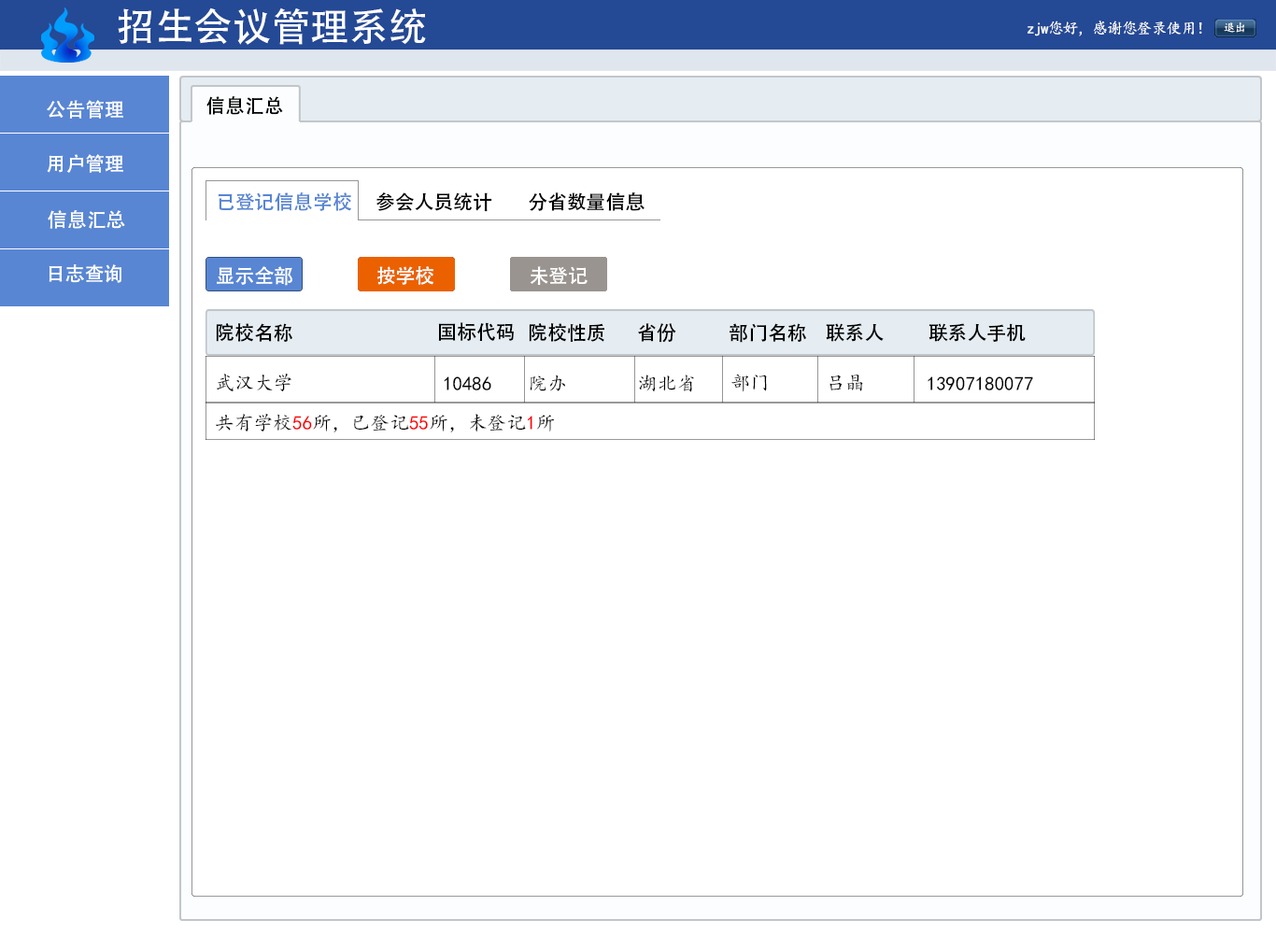
<style>
.page{position:relative;width:1276px;height:934px;background:#ffffff}
.page>*{position:absolute;margin:0}
.t1{font:38.9px "AdobeHeitiStd-Regular";color:#ffffff}
.t2{font:15.6px "KaiTi";letter-spacing:-0.05em;color:#ffffff}
.t3{font:11.7px "KaiTi";letter-spacing:-0.05em;color:#ffffff}
.t4{font:19.5px "AdobeHeitiStd-Regular";color:#fefefe}
.t5{font:19.5px "AdobeHeitiStd-Regular";color:#000000}
.t6{font:19.5px "AdobeHeitiStd-Regular";color:#5886d3}
.t7{font:19.5px "AdobeHeitiStd-Regular";color:#010101}
.t8{font:19.5px "AdobeHeitiStd-Regular";color:#ffffff}
.t9{font:19.5px "KaiTi";color:#000000}
.t10{font:19.5px "KaiTi";color:#fe0000}
.t11{font:19.5px "KaiTi";color:#ff0101}
</style>
<div class="page">
<p class="t1" style="left:118px;top:7px;width:308px;height:38px">招生会议管理系统</p>
<p class="t2" style="left:1028px;top:21px;width:174px;height:15px">zjw您好，感谢您登录使用！</p>
<p class="t3" style="left:1224px;top:22px;width:21px;height:11px">退出</p>
<p class="t4" style="left:47px;top:100px;width:76px;height:19px">公告管理</p>
<p class="t5" style="left:206px;top:96px;width:77px;height:19px">信息汇总</p>
<p class="t4" style="left:47px;top:154px;width:76px;height:19px">用户管理</p>
<p class="t6" style="left:218px;top:192px;width:133px;height:19px">已登记信息学校</p>
<p class="t7" style="left:377px;top:192px;width:115px;height:20px">参会人员统计</p>
<p class="t5" style="left:529px;top:192px;width:116px;height:19px">分省数量信息</p>
<p class="t4" style="left:48px;top:210px;width:77px;height:19px">信息汇总</p>
<p class="t4" style="left:49px;top:264px;width:72px;height:19px">日志查询</p>
<p class="t8" style="left:217px;top:266px;width:75px;height:20px">显示全部</p>
<p class="t8" style="left:377px;top:266px;width:57px;height:19px">按学校</p>
<p class="t4" style="left:530px;top:266px;width:58px;height:19px">未登记</p>
<p class="t7" style="left:216px;top:323px;width:76px;height:19px">院校名称</p>
<p class="t5" style="left:438px;top:322px;width:76px;height:19px">国标代码</p>
<p class="t5" style="left:529px;top:323px;width:75px;height:19px">院校性质</p>
<p class="t5" style="left:638px;top:323px;width:38px;height:20px">省份</p>
<p class="t5" style="left:730px;top:323px;width:76px;height:20px">部门名称</p>
<p class="t5" style="left:826px;top:323px;width:58px;height:19px">联系人</p>
<p class="t5" style="left:929px;top:323px;width:97px;height:19px">联系人手机</p>
<p class="t9" style="left:217px;top:374px;width:75px;height:17px">武汉大学</p>
<p class="t9" style="left:444px;top:377px;width:47px;height:14px">10486</p>
<p class="t9" style="left:530px;top:375px;width:35px;height:16px">院办</p>
<p class="t9" style="left:639px;top:375px;width:55px;height:17px">湖北省</p>
<p class="t9" style="left:732px;top:374px;width:35px;height:18px">部门</p>
<p class="t9" style="left:830px;top:375px;width:33px;height:16px">吕晶</p>
<p class="t9" style="left:928px;top:377px;width:105px;height:14px">13907180077</p>
<p class="t9" style="left:216px;top:414px;width:339px;height:19px">共有学校<span class="t10">56</span>所，已登记<span class="t11">55</span>所，未登记<span class="t10">1</span>所</p>
</div>
